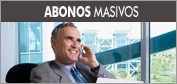
<style>
.page{position:relative;width:177px;height:84px;background:#494343}
.page>*{position:absolute;margin:0}
.t1{font:15px "FuturaBT-Medium";letter-spacing:-0.025em;color:#ffffff;scale:0.7 1}
.t2{font:15px "FuturaBT-Bold";letter-spacing:-0.025em;color:#ffffff;scale:0.7 1}
</style>
<div class="page">
<p class="t1" style="left:44px;top:6px;width:95px;height:11px"><span class="t2">ABONOS </span>MASIVOS</p>
</div>
